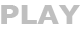
<style>
.page{position:relative;width:80px;height:30px;background:#ffffff}
.page>*{position:absolute;margin:0}
.t1{font:25.8px "Tahoma-Bold";color:#bfbfbf;scale:1.22 1}
</style>
<div class="page">
<p class="t1" style="left:1px;top:5px;width:79px;height:19px">PLAY</p>
</div>
